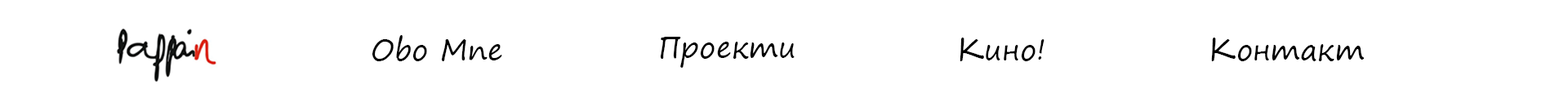
<style>
.page{position:relative;width:1568px;height:98px;background:#ffffff}
.page>*{position:absolute;margin:0}
.t1{font:29.4px "SegoePrint";color:#000000}
</style>
<div class="page">
<p class="t1" style="left:372px;top:35px;width:130px;height:26px">Obo Mne</p>
<p class="t1" style="left:661px;top:37px;width:134px;height:31px">Проекти</p>
<p class="t1" style="left:960px;top:38px;width:85px;height:23px">Кино!</p>
<p class="t1" style="left:1211px;top:38px;width:154px;height:23px">Контакт</p>
</div>
